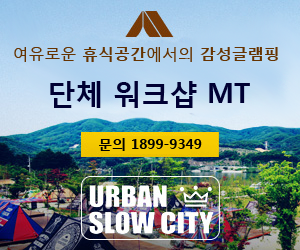
<style>
.page{position:relative;width:300px;height:250px}
.page>*{position:absolute;margin:0}
.t1{font:16px "MalgunGothicBold";color:#663300}
.t2{font:16px "MalgunGothicRegular";color:#663300}
.t3{font:28px "MalgunGothicBold";color:#000033}
.t4{font:14px "MalgunGothicBold";color:#000000}
</style>
<div class="page">
<p class="t1" style="left:14px;top:47px;width:264px;height:15px"><span class="t2">여유로운 </span>휴식공간<span class="t2">에서의 </span>감성글램핑</p>
<p class="t3" style="left:50px;top:81px;width:200px;height:27px">단체 워크샵 MT</p>
<p class="t4" style="left:99px;top:138px;width:103px;height:13px">문의 1899-9349</p>
</div>
